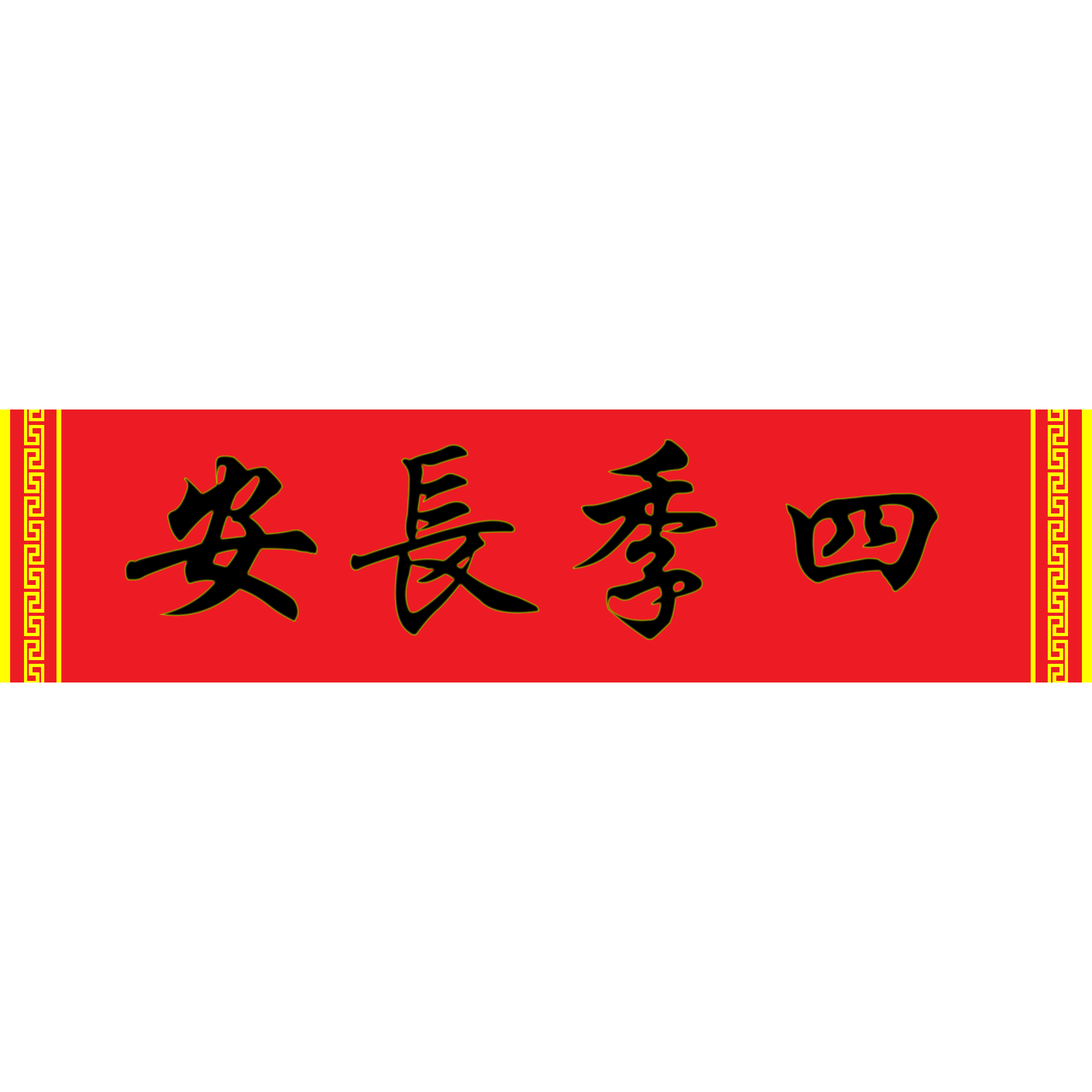
<style>
.page{position:relative;width:1092px;height:1092px;background:#ffffff}
.page>*{position:absolute;margin:0}
.t1{font:214.9px "FZXKFW--GB1-0";color:#000000}
</style>
<div class="page">
<p class="t1" style="left:125px;top:439px;width:814px;height:201px">安长季四</p>
</div>
